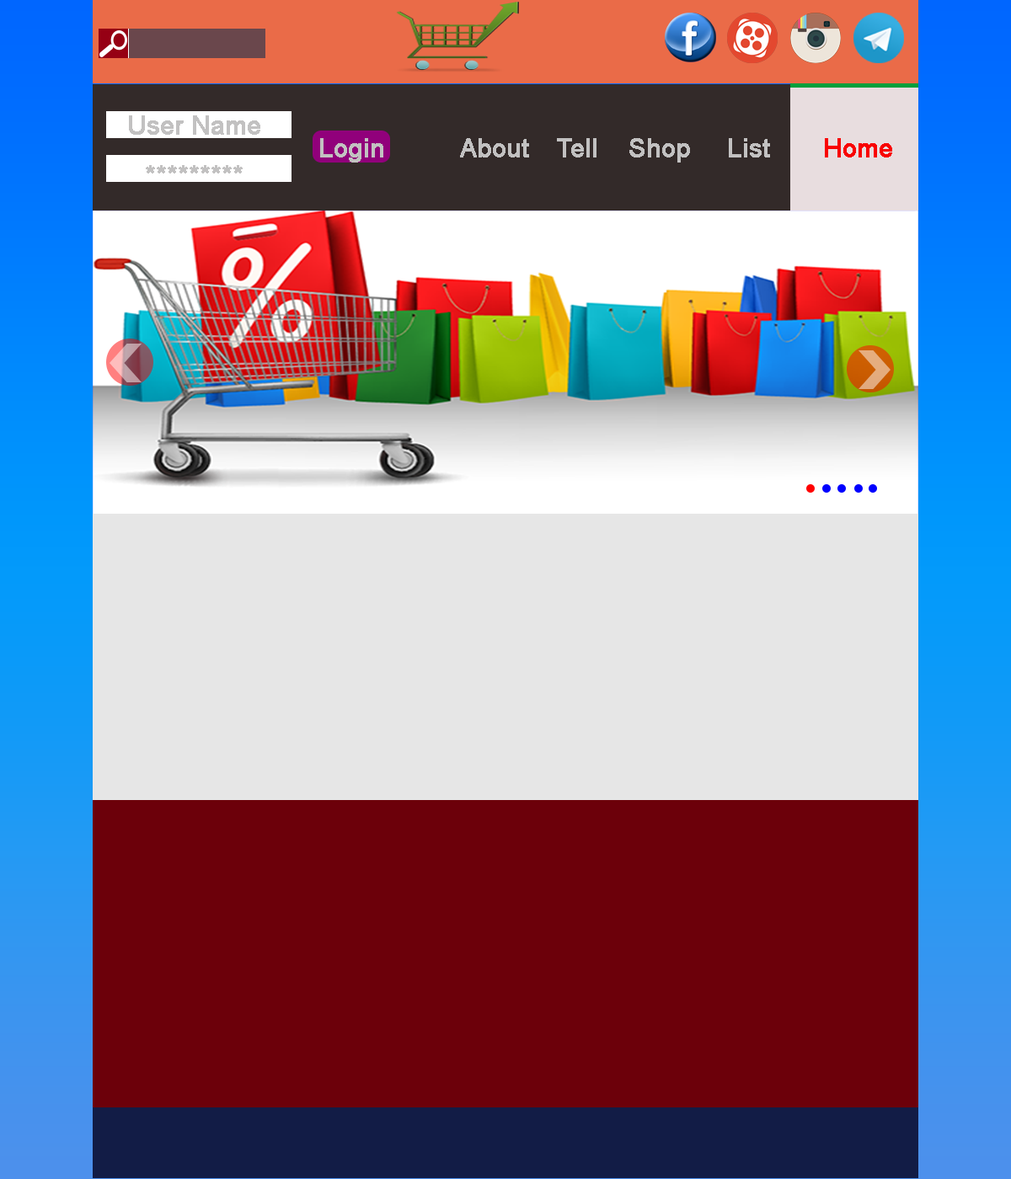
<style>
.page{position:relative;width:1011px;height:1179px;background:#6c000a}
.page>*{position:absolute;margin:0}
.t1{font:25.3px "ArialMT";color:#c2c1c1;font-weight:bold}
.t2{font:25.3px "ArialMT";color:#f80202;font-weight:bold}
</style>
<div class="page">
<p class="t1" style="left:129px;top:115px;width:131px;height:20px">User Name</p>
<p class="t1" style="left:320px;top:138px;width:63px;height:25px">Login</p>
<p class="t1" style="left:460px;top:138px;width:69px;height:20px">About</p>
<p class="t1" style="left:557px;top:138px;width:39px;height:20px">Tell</p>
<p class="t1" style="left:629px;top:138px;width:61px;height:25px">Shop</p>
<p class="t1" style="left:729px;top:138px;width:41px;height:20px">List</p>
<p class="t2" style="left:825px;top:138px;width:67px;height:20px">Home</p>
<p class="t1" style="left:146px;top:165px;width:97px;height:9px">*********</p>
</div>
